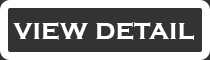
<style>
.page{position:relative;width:210px;height:60px;background:#333333}
.page>*{position:absolute;margin:0}
.t1{font:29px "CopperplateGothic-Bold";color:#ffffff}
</style>
<div class="page">
<p class="t1" style="left:13px;top:22px;width:181px;height:18px">view detail</p>
</div>
